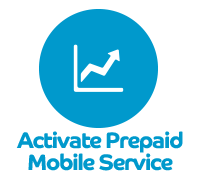
<style>
.page{position:relative;width:200px;height:176px;background:#ffffff}
.page>*{position:absolute;margin:0}
.t1{font:22.4px/22.4px "CoHeadline-Bold";letter-spacing:-0.05em;color:#0099cc}
</style>
<div class="page">
<p class="t1" style="left:16px;top:131px;width:167px;height:40px;text-align:center">Activate Prepaid Mobile Service</p>
</div>
